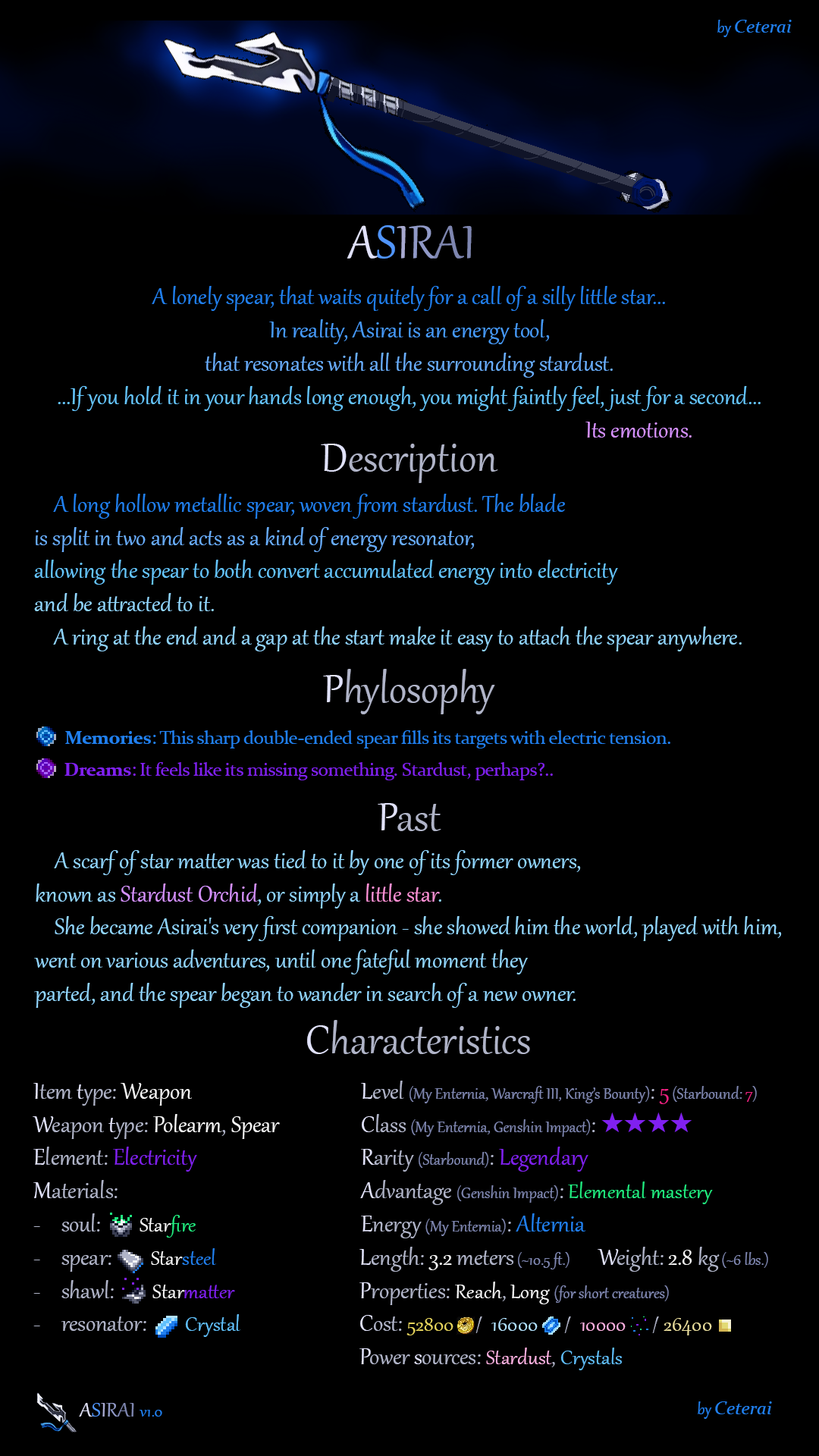
<style>
.page{position:relative;width:819px;height:1456px;background:#000000}
.page>*{position:absolute;margin:0}
.t1{font:19px "Constantia-Italic";color:#2080f0}
.t2{font:19px "Gabriola";color:#2080f0}
.t3{font:56.9px "Gabriola";color:#7e86b0}
.t4{font:56.9px "Gabriola";color:#e1e2fa}
.t5{font:56.9px "Gabriola";color:#5095fd}
.t6{font:56.9px "Gabriola";color:#a7a9d0}
.t7{font:56.9px "Gabriola";color:#9099c7}
.t8{font:27.7px "Gabriola";color:#65c6ff}
.t9{font:27.7px "Gabriola";color:#2080f0}
.t10{font:27.7px "Gabriola";color:#469afb}
.t11{font:27.7px "Gabriola";color:#69aefe}
.t12{font:27.7px "Gabriola";color:#d691ff}
.t13{font:49.5px "Gabriola";color:#b0b4c8}
.t14{font:49.5px "Gabriola";color:#e1e2fa}
.t15{font:27.7px "Gabriola";color:#91d6ff}
.t16{font:19px "Constantia";letter-spacing:-0.025em;color:#2080f0}
.t17{font:19px "Constantia-Bold";letter-spacing:-0.025em;color:#2080f0}
.t18{font:19px "Constantia";letter-spacing:-0.025em;color:#8020f0}
.t19{font:19px "Constantia-Bold";letter-spacing:-0.025em;color:#8020f0}
.t20{font:27.7px "Gabriola";color:#ff91d6}
.t21{font:27.7px "Gabriola";color:#b0b4c8}
.t22{font:27.7px "Gabriola";color:#e1e2fa}
.t23{font:27.7px "Gabriola";color:#f6f6f6}
.t24{font:27.7px "Gabriola";color:#8020f0}
.t25{font:25.3px "Gabriola";color:#f6f6f6}
.t26{font:25.3px "Gabriola";color:#20f080}
.t27{font:25.3px "Gabriola";color:#2080f0}
.t28{font:25.3px "Gabriola";color:#8020f0}
.t29{font:25.3px "Gabriola";color:#60c0fc}
.t30{font:19px "Gabriola";color:#7e86b0}
.t31{font:27.7px "Gabriola";color:#f02080}
.t32{font:19px "Gabriola";color:#f02080}
.t33{font:27.7px "SegoeUISymbol";color:#8020f0}
.t34{font:25.3px "Gabriola";color:#b0b4c8}
.t35{font:25.3px "Gabriola";color:#e7d55c}
.t36{font:25.3px "Gabriola";color:#b0e0fc}
.t37{font:25.3px "Gabriola";color:#fcb0e0}
.t38{font:25.3px "Gabriola";color:#eade9d}
.t39{font:20.3px "Gabriola";color:#2080f0}
.t40{font:25.3px "Gabriola";color:#e1e2fa}
.t41{font:25.3px "Gabriola";color:#5095fd}
.t42{font:25.3px "Gabriola";color:#a7a9d0}
.t43{font:25.3px "Gabriola";color:#9099c7}
.t44{font:25.3px "Gabriola";color:#7e86b0}
</style>
<div class="page">
<p class="t1" style="left:717px;top:20px;width:75px;height:17px"><span class="t2">by </span>Ceterai</p>
<p class="t3" style="left:347px;top:225px;width:125px;height:34px"><span class="t4">A</span><span class="t5">S</span><span class="t6">I</span><span class="t7">R</span>AI</p>
<p class="t8" style="left:58px;top:286px;width:703px;height:152px;text-align:center"><span class="t9">A lonely spear, that waits quitely for a call of a silly little star...<br></span><span class="t10">In reality, Asirai is an energy tool,<br></span><span class="t11">that resonates with all the surrounding stardust.<br></span>...If you hold it in your hands long enough, you might faintly feel, just for a second...<br>                                                                                               <span class="t12">Its emotions.</span></p>
<p class="t13" style="left:321px;top:444px;width:177px;height:39px"><span class="t14">D</span>escription</p>
<p class="t15" style="left:34px;top:494px;width:708px;height:157px"><span class="t9">    A long hollow metallic spear, woven from stardust. The blade<br></span><span class="t11">is split in two and acts as a kind of energy resonator,<br></span><span class="t8">allowing the spear to both convert accumulated energy into electricity<br></span>and be attracted to it.<br>    A ring at the end and a gap at the start make it easy to attach the spear anywhere.</p>
<p class="t13" style="left:323px;top:669px;width:172px;height:45px"><span class="t14">P</span>hylosophy</p>
<p class="t16" style="left:65px;top:730px;width:605px;height:18px"><span class="t17">Memories</span>: This sharp double-ended spear fills its targets with electric tension.</p>
<p class="t18" style="left:64px;top:762px;width:489px;height:18px"><span class="t19">Dreams</span>: It feels like its missing something. Stardust, perhaps?..</p>
<p class="t13" style="left:378px;top:803px;width:63px;height:28px"><span class="t14">P</span>ast</p>
<p class="t15" style="left:34px;top:850px;width:748px;height:158px"><span class="t9">    </span>A scarf of star matter was tied to it by one of its former owners,<br>known as <span class="t12">Stardust Orchid</span>, or simply a <span class="t20">little star</span>.<br>    She became Asirai's very first companion - she showed him the world, played with him,<br>went on various adventures, until one fateful moment they<br>parted, and the spear began to wander in search of a new owner.</p>
<p class="t13" style="left:307px;top:1020px;width:223px;height:34px"><span class="t14">C</span>haracteristics</p>
<p class="t21" style="left:33px;top:1083px;width:247px;height:254px"><span class="t22">I</span>tem <span class="t22">t</span>ype: <span class="t23">Weapon<br></span><span class="t22">W</span>eapon <span class="t22">t</span>ype: <span class="t23">Polearm</span>, <span class="t23">Spear<br></span><span class="t22">E</span>lement: <span class="t24">Electricity<br></span><span class="t22">M</span>aterials:<br>soul:        <span class="t25">Star</span><span class="t26">fire<br></span>spear:        <span class="t25">Star</span><span class="t27">steel<br></span>shawl:        <span class="t25">Star</span><span class="t28">matter<br></span>resonator:        <span class="t29">Crystal</span></p>
<p class="t30" style="left:360px;top:1081px;width:397px;height:157px"><span class="t22">L</span><span class="t21">evel </span>(My Enternia, Warcraft III, King’s Bounty)<span class="t21">: </span><span class="t31">5</span> (Starbound: <span class="t32">7</span>)<br><span class="t22">C</span><span class="t21">lass </span>(My Enternia, Genshin Impact)<span class="t21">: </span><span class="t33">★★★★<br></span><span class="t22">R</span><span class="t21">arity </span>(Starbound)<span class="t21">: </span><span class="t24">Legendary<br></span><span class="t22">A</span><span class="t21">dvantage </span>(Genshin Impact)<span class="t21">: </span><span class="t26">Elemental mastery<br></span><span class="t22">E</span><span class="t21">nergy </span>(My Enternia)<span class="t21">:</span><span class="t9"> Alternia</span></p>
<p class="t30" style="left:359px;top:1247px;width:409px;height:123px"><span class="t22">L</span><span class="t21">ength: </span><span class="t23">3.2</span><span class="t21"> meters</span> (~10.5 ft.)        <span class="t22">W</span><span class="t21">eight: </span><span class="t23">2.8</span><span class="t21"> kg</span> (~6 lbs.)<br><span class="t22">P</span><span class="t21">roperties: </span><span class="t25">Reach</span><span class="t34">, </span><span class="t25">Long </span>(for short creatures)<br><span class="t22">C</span><span class="t21">ost: </span><span class="t35">52800 </span><span class="t34">    /  </span><span class="t36">16000</span><span class="t34">      /  </span><span class="t37">10000      </span><span class="t34">/ </span><span class="t38">26400<br></span><span class="t22">P</span><span class="t21">ower </span><span class="t22">s</span><span class="t21">ources: </span><span class="t37">Stardust</span><span class="t34">, </span><span class="t29">Crystals</span></p>
<p class="t39" style="left:79px;top:1403px;width:83px;height:14px"><span class="t40">A</span><span class="t41">S</span><span class="t42">I</span><span class="t43">R</span><span class="t44">AI </span>v1.0</p>
<p class="t1" style="left:698px;top:1401px;width:74px;height:18px"><span class="t2">by </span>Ceterai</p>
</div>
